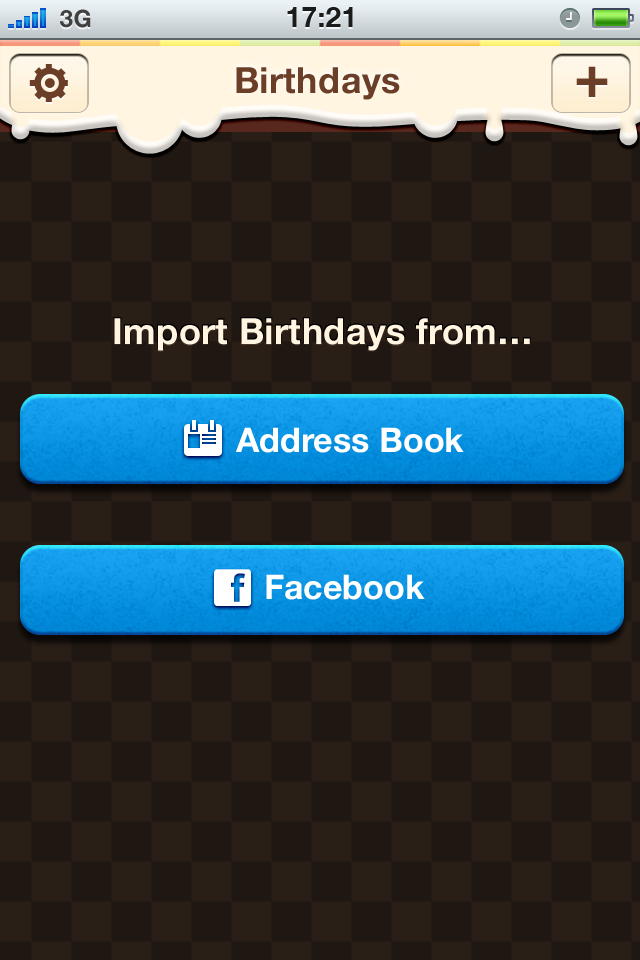
<style>
.page{position:relative;width:640px;height:960px;background:#1f1711}
.page>*{position:absolute;margin:0}
.t1{font:24px "HelveticaNeue-Bold";color:#404040;text-transform:uppercase}
.t2{font:28px "HelveticaNeue-Bold";color:#1a1b1b;text-transform:uppercase}
.t3{font:36px "HelveticaNeue-Bold";letter-spacing:0.01em;color:#6a3e27}
.t4{font:60px "HelveticaNeue-Bold";letter-spacing:0.01em;color:#6a3e27}
.t5{font:36px "HelveticaNeue-Bold";letter-spacing:0.01em;color:#fff5e1}
.t6{font:34px "HelveticaNeue-Bold";color:#ffffff}
.t7{font:38px "WebSymbols-Regular";color:#ffffff}
</style>
<div class="page">
<p class="t1" style="left:60px;top:9px;width:31px;height:19px">3G</p>
<p class="t2" style="left:287px;top:7px;width:66px;height:20px">17:21</p>
<p class="t3" style="left:236px;top:67px;width:164px;height:33px">Birthdays</p>
<p class="t4" style="left:576px;top:66px;width:32px;height:31px">+</p>
<p class="t5" style="left:114px;top:318px;width:416px;height:33px">Import Birthdays from…</p>
<p class="t6" style="left:235px;top:427px;width:229px;height:26px">Address Book</p>
<p class="t7" style="left:214px;top:569px;width:37px;height:37px">f</p>
<p class="t6" style="left:266px;top:574px;width:159px;height:26px">Facebook</p>
</div>
